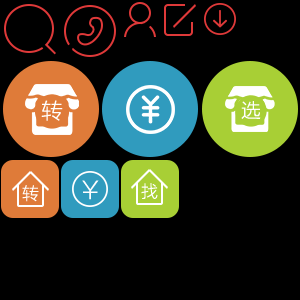
<style>
.page{position:relative;width:300px;height:300px;background:#000000}
.page>*{position:absolute;margin:0}
.t1{font:21.4px "STHeitiSC-Medium";color:#ffffff}
.t2{font:19.6px "STHeitiSC-Medium";color:#ffffff}
.t3{font:17px "STHeitiSC-Medium";color:#ffffff}
.t4{font:24px "STHeitiSC-Medium";color:#fffefe}
</style>
<div class="page">
<p class="t1" style="left:41px;top:100px;width:22px;height:21px">转</p>
<p class="t2" style="left:241px;top:101px;width:20px;height:18px">选</p>
<p class="t3" style="left:22px;top:185px;width:17px;height:17px">转</p>
<p class="t4" style="left:82px;top:180px;width:17px;height:20px">￥</p>
<p class="t3" style="left:141px;top:183px;width:17px;height:16px">找</p>
</div>
